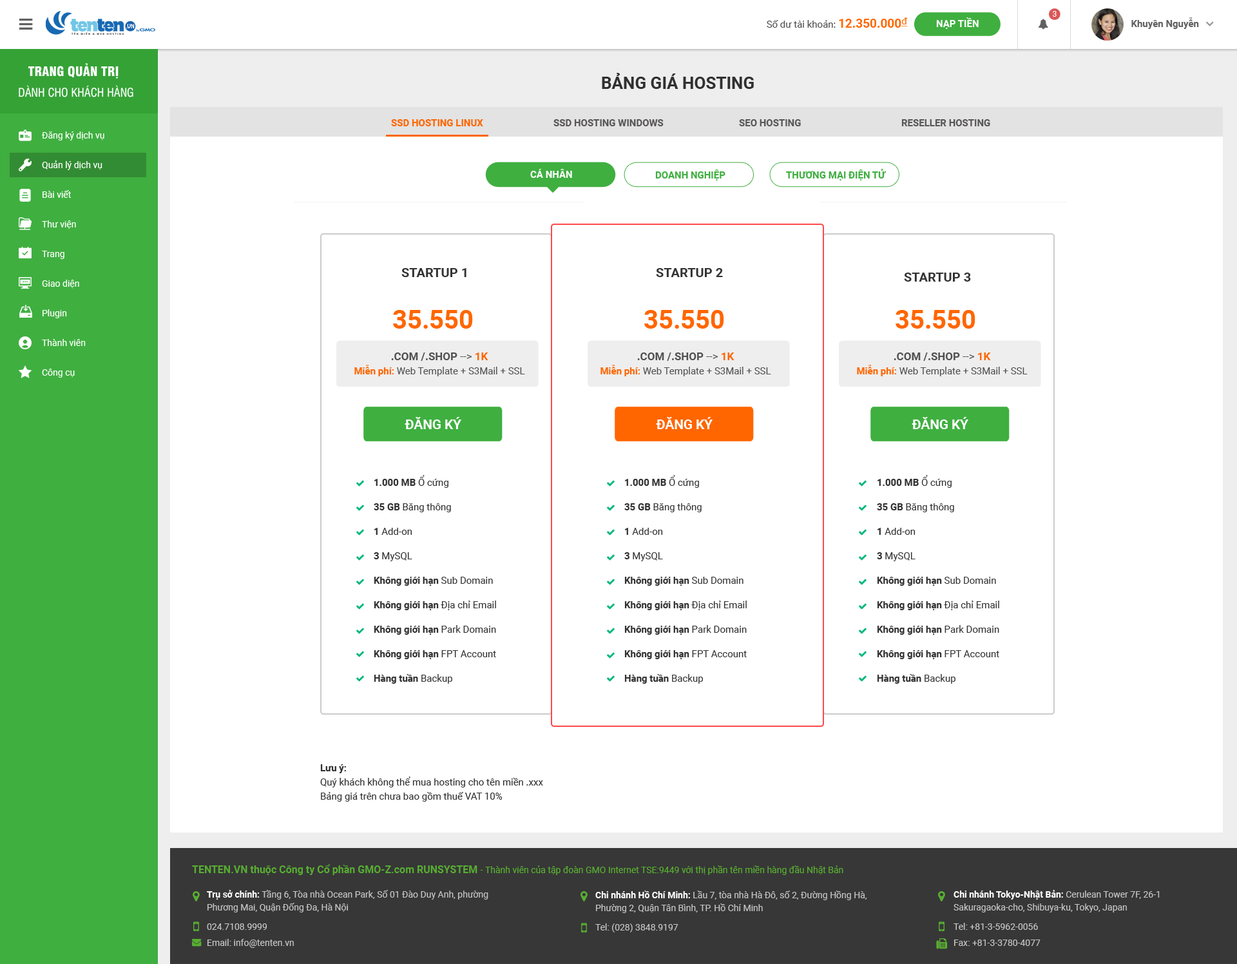
<style>
.page{position:relative;width:1237px;height:964px;background:#ffffff}
.page>*{position:absolute;margin:0}
.t1{font:9.7px "Roboto-Regular";color:#4e4e4e}
.t2{font:12.2px "Roboto-Bold";color:#ff6600}
.t3{font:9.7px "Roboto-Regular";color:#ff6600;text-decoration:underline}
.t4{font:9.7px "Roboto-Bold";color:#ffffff}
.t5{font:7.7px "Roboto-Regular";color:#ffffff;text-transform:uppercase}
.t6{font:9.7px "Roboto-Bold";color:#616161}
.t7{font:12.9px "UTM-Swiss-721-Black-Condensed";color:#ffffff;text-transform:uppercase}
.t8{font:16.8px "Roboto-Bold";color:#303030;text-transform:uppercase}
.t9{font:11.6px "UTM-Swiss-Condensed";color:#ffffff;text-transform:uppercase}
.t10{font:9.7px "Roboto-Bold";color:#595757;text-transform:uppercase}
.t11{font:9.7px "Roboto-Bold";color:#ff6600;text-transform:uppercase}
.t12{font:9px/29.6px "Roboto-Regular";color:#ffffff}
.t13{font:9.7px "Roboto-Bold";color:#ffffff;text-transform:uppercase}
.t14{font:9.7px "Roboto-Bold";color:#3faf40;text-transform:uppercase}
.t15{font:12.9px "Roboto-Bold";color:#333333;text-transform:uppercase}
.t16{font:25.8px "Roboto-Bold";color:#ff6600}
.t17{font:9.7px/14.2px "Roboto-Regular";color:#505050}
.t18{font:11px/14.2px "Roboto-Bold";color:#505050}
.t19{font:11px/14.2px "Roboto-Regular";color:#505050}
.t20{font:11px/14.2px "Roboto-Bold";color:#ff6600}
.t21{font:9.7px/14.2px "Roboto-Bold";color:#ff6600}
.t22{font:13.3px "Roboto-Bold";color:#ffffff;text-transform:uppercase}
.t23{font:9.7px/24.5px "Roboto-Bold";color:#333333}
.t24{font:9.7px/24.5px "Roboto-Regular";color:#333333}
.t25{font:9.7px/14.2px "Roboto-Regular";color:#303030}
.t26{font:9.7px/14.2px "Roboto-Bold";color:#303030}
.t27{font:9px "Roboto-Regular";color:#57ae31}
.t28{font:10.3px "Roboto-Bold";color:#57ae31}
.t29{font:9px/12.9px "Roboto-Regular";color:#c4c4c4}
.t30{font:9px/12.9px "Roboto-Bold";color:#ffffff}
.t31{font:9px/19.3px "Roboto-Regular";color:#c4c4c4}
.t32{font:9px/16.1px "Roboto-Regular";color:#c4c4c4}
</style>
<div class="page">
<p class="t1" style="left:767px;top:17px;width:141px;height:11px">Số dư tài khoản: <span class="t2">12.350.000</span><span class="t3">đ</span></p>
<p class="t4" style="left:936px;top:17px;width:43px;height:12px">NẠP TIỀN</p>
<p class="t5" style="left:1052px;top:11px;width:5px;height:6px">3</p>
<p class="t6" style="left:1131px;top:17px;width:68px;height:12px">Khuyên Nguyễn</p>
<p class="t7" style="left:28px;top:63px;width:91px;height:16px">Trang quản trị</p>
<p class="t8" style="left:602px;top:73px;width:152px;height:16px">bảng giá hosting</p>
<p class="t9" style="left:19px;top:85px;width:114px;height:12px">Dành cho Khách hàng</p>
<p class="t10" style="left:391px;top:119px;width:599px;height:7px"><span class="t11">SSD HOSTING LINUX    </span>SSD HOSTING WINDOWS     SEO HOSTING      RESELLER HOSTING</p>
<p class="t12" style="left:41px;top:131px;width:63px;height:247px">Đăng ký dịch vụ<br>Quản lý dịch vụ<br>Bài viết<br>Thư viện<br>Trang<br>Giao diện<br>Plugin<br>Thành viên<br>Công cụ</p>
<p class="t13" style="left:530px;top:169px;width:42px;height:9px">Cá nhân</p>
<p class="t14" style="left:655px;top:169px;width:71px;height:11px">Doanh nghiệp</p>
<p class="t14" style="left:786px;top:169px;width:100px;height:11px">thương mại điện tử</p>
<p class="t15" style="left:401px;top:268px;width:65px;height:9px">startup 1</p>
<p class="t15" style="left:656px;top:268px;width:67px;height:9px">startup 2</p>
<p class="t15" style="left:904px;top:273px;width:67px;height:9px">startup 3</p>
<p class="t16" style="left:393px;top:310px;width:80px;height:19px">35.550</p>
<p class="t16" style="left:644px;top:310px;width:80px;height:19px">35.550</p>
<p class="t16" style="left:896px;top:310px;width:79px;height:19px">35.550</p>
<p class="t17" style="left:354px;top:352px;width:171px;height:24px;text-align:center"><span class="t18">.COM /.SHOP </span><span class="t19">--&gt; </span><span class="t20">1K<br></span><span class="t21">Miễn phí: </span>Web Template + S3Mail + SSL</p>
<p class="t17" style="left:601px;top:352px;width:170px;height:24px;text-align:center"><span class="t18">.COM /.SHOP </span><span class="t19">--&gt; </span><span class="t20">1K<br></span><span class="t21">Miễn phí: </span>Web Template + S3Mail + SSL</p>
<p class="t17" style="left:857px;top:352px;width:171px;height:24px;text-align:center"><span class="t18">.COM /.SHOP </span><span class="t19">--&gt; </span><span class="t20">1K<br></span><span class="t21">Miễn phí: </span>Web Template + S3Mail + SSL</p>
<p class="t22" style="left:405px;top:417px;width:56px;height:12px">Đăng ký</p>
<p class="t22" style="left:656px;top:417px;width:57px;height:12px">Đăng ký</p>
<p class="t22" style="left:912px;top:417px;width:56px;height:12px">Đăng ký</p>
<p class="t23" style="left:374px;top:475px;width:122px;height:209px">1.000 MB<span class="t24"> Ổ cứng<br></span>35 GB<span class="t24"> Băng thông<br></span>1<span class="t24"> Add-on<br></span>3<span class="t24"> MySQL<br></span>Không giới hạn<span class="t24"> Sub Domain<br></span>Không giới hạn<span class="t24"> Địa chỉ Email<br></span>Không giới hạn<span class="t24"> Park Domain<br></span>Không giới hạn<span class="t24"> FPT Account<br></span>Hàng tuần<span class="t24"> Backup</span></p>
<p class="t23" style="left:624px;top:475px;width:123px;height:209px">1.000 MB<span class="t24"> Ổ cứng<br></span>35 GB<span class="t24"> Băng thông<br></span>1<span class="t24"> Add-on<br></span>3<span class="t24"> MySQL<br></span>Không giới hạn<span class="t24"> Sub Domain<br></span>Không giới hạn<span class="t24"> Địa chỉ Email<br></span>Không giới hạn<span class="t24"> Park Domain<br></span>Không giới hạn<span class="t24"> FPT Account<br></span>Hàng tuần<span class="t24"> Backup</span></p>
<p class="t23" style="left:877px;top:475px;width:122px;height:209px">1.000 MB<span class="t24"> Ổ cứng<br></span>35 GB<span class="t24"> Băng thông<br></span>1<span class="t24"> Add-on<br></span>3<span class="t24"> MySQL<br></span>Không giới hạn<span class="t24"> Sub Domain<br></span>Không giới hạn<span class="t24"> Địa chỉ Email<br></span>Không giới hạn<span class="t24"> Park Domain<br></span>Không giới hạn<span class="t24"> FPT Account<br></span>Hàng tuần<span class="t24"> Backup</span></p>
<p class="t25" style="left:320px;top:764px;width:223px;height:38px"><span class="t26">Lưu ý:<br></span>Quý khách không thể mua hosting cho tên miền .xxx<br>Bảng giá trên chưa bao gồm thuế VAT 10%</p>
<p class="t27" style="left:192px;top:864px;width:651px;height:11px"><span class="t28">TENTEN.VN thuộc Công ty Cổ phần GMO-Z.com RUNSYSTEM </span>- Thành viên của tập đoàn GMO Internet TSE:9449 với thị phần tên miền hàng đầu Nhật Bản</p>
<p class="t29" style="left:207px;top:890px;width:281px;height:58px"><span class="t30">Trụ sở chính:</span> Tầng 6, Tòa nhà Ocean Park, Số 01 Đào Duy Anh, phường Phương Mai, Quận Đống Đa, Hà Nội<br><span class="t31">024.7108.9999<br></span><span class="t32">Email: info@tenten.vn</span></p>
<p class="t29" style="left:595px;top:890px;width:272px;height:42px"><span class="t30">Chi nhánh Hồ Chí Minh: </span>Lầu 7, tòa nhà Hà Đô, số 2, Đường Hồng Hà, Phường 2, Quận Tân Bình, TP. Hồ Chí Minh<br><span class="t31">Tel: (028) 3848.9197</span></p>
<p class="t29" style="left:954px;top:890px;width:206px;height:56px"><span class="t30">Chi nhánh Tokyo-Nhật Bản:</span> Cerulean Tower 7F, 26-1 Sakuragaoka-cho, Shibuya-ku, Tokyo, Japan <br><span class="t31">Tel: +81-3-5962-0056<br></span><span class="t32">Fax: +81-3-3780-4077</span></p>
</div>
